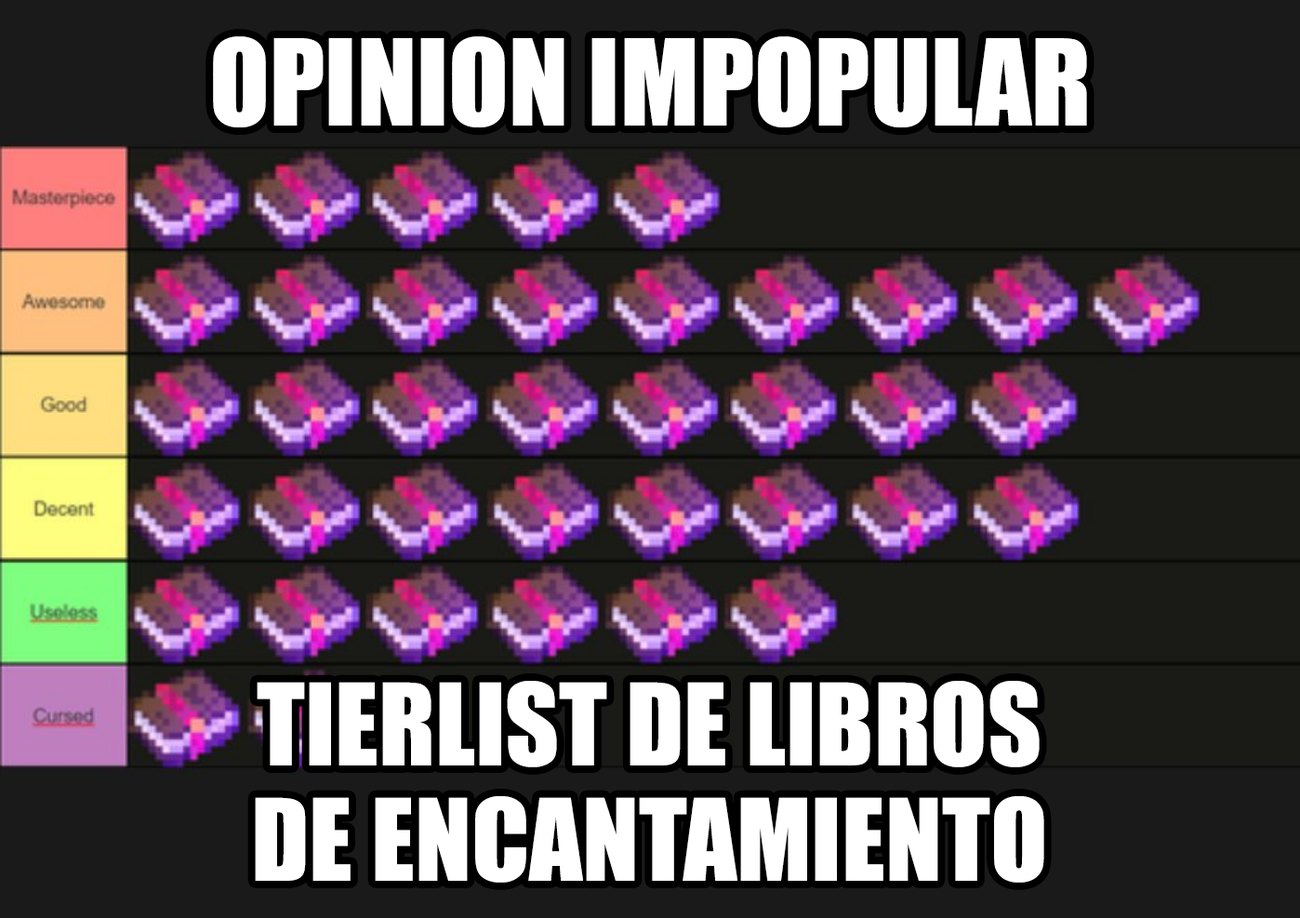
<style>
.page{position:relative;width:1300px;height:918px}
.page>*{position:absolute;margin:0}
.t1{font:110.4px "Impact";color:#ffffff}
.t2{font:104.7px "Impact";color:#ffffff}
</style>
<div class="page">
<p class="t1" style="left:213px;top:36px;width:874px;height:91px">OPINION IMPOPULAR</p>
<p class="t2" style="left:255px;top:680px;width:789px;height:202px;text-align:center">TIERLIST DE LIBROS<br>DE ENCANTAMIENTO</p>
</div>
